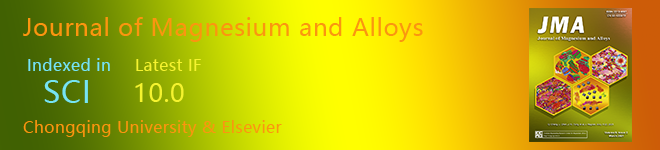
<style>
.page{position:relative;width:660px;height:150px}
.page>*{position:absolute;margin:0}
.t1{font:24px "MicrosoftYaHei";letter-spacing:0.025em;color:#fb9510}
.t2{font:16px "MicrosoftYaHei";letter-spacing:0.025em;color:#76e6f3}
.t3{font:16px "MicrosoftYaHei";letter-spacing:0.025em;color:#f5f32f}
.t4{font:30px "MicrosoftYaHei";letter-spacing:0.025em;color:#76e6f3}
.t5{font:25px "MicrosoftYaHei";letter-spacing:0.025em;color:#f5f32f}
.t6{font:16px "MicrosoftYaHei";letter-spacing:0.025em;color:#fb9510}
</style>
<div class="page">
<p class="t1" style="left:23px;top:17px;width:400px;height:25px">Journal of Magnesium and Alloys</p>
<p class="t2" style="left:28px;top:58px;width:82px;height:13px">Indexed in</p>
<p class="t3" style="left:136px;top:59px;width:65px;height:12px">Latest IF</p>
<p class="t4" style="left:44px;top:80px;width:44px;height:23px">SCI</p>
<p class="t5" style="left:135px;top:83px;width:49px;height:19px">10.0</p>
<p class="t6" style="left:23px;top:120px;width:259px;height:17px">Chongqing University &amp; Elsevier</p>
</div>
